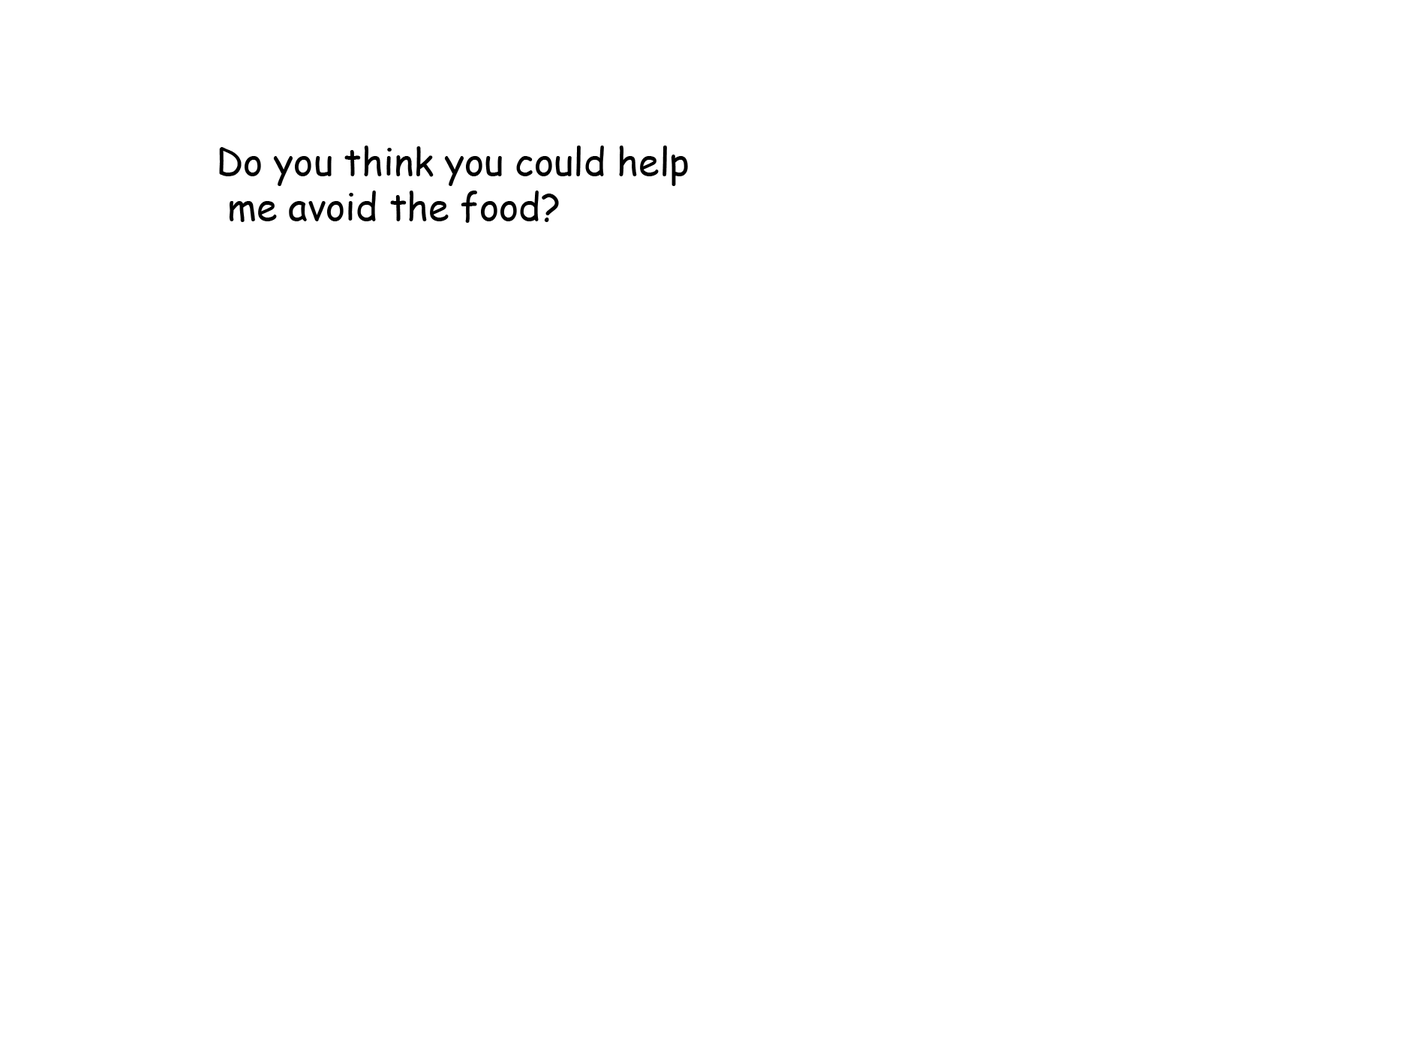
<style>
.page{position:relative;width:1418px;height:1063px;background:#ffffff}
.page>*{position:absolute;margin:0}
.t1{font:9px "ComicSansMS";color:#000000}
</style>
<div class="page">
<p class="t1" style="left:219px;top:146px;width:469px;height:77px">Do you think you could help<br> me avoid the food?</p>
</div>
